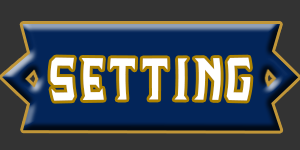
<style>
.page{position:relative;width:300px;height:150px;background:#333333}
.page>*{position:absolute;margin:0}
.t1{font:62.5px "Lorde-Havana";letter-spacing:0.1em;color:#ffffff;scale:0.75 1}
</style>
<div class="page">
<p class="t1" style="left:50px;top:57px;width:201px;height:44px">Setting</p>
</div>
